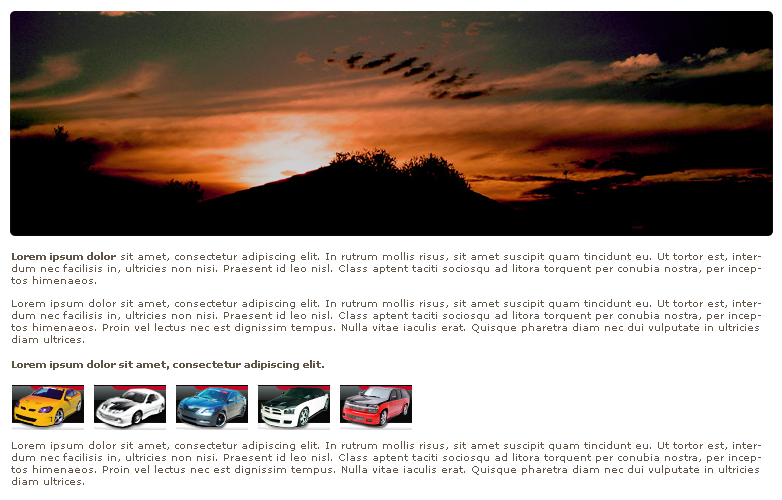
<style>
.page{position:relative;width:782px;height:500px;background:#ffffff}
.page>*{position:absolute;margin:0}
.t1{font:10px "Verdana";color:#615548}
.t2{font:10px "Verdana-Bold";color:#615548}
</style>
<div class="page">
<p class="t1" style="left:11px;top:252px;width:750px;height:32px"><span class="t2">Lorem ipsum dolor</span> sit amet, consectetur adipiscing elit. In rutrum mollis risus, sit amet suscipit quam tincidunt eu. Ut tortor est, interdum nec facilisis in, ultricies non nisi. Praesent id leo nisl. Class aptent taciti sociosqu ad litora torquent per conubia nostra, per inceptos himenaeos.</p>
<p class="t1" style="left:11px;top:299px;width:750px;height:44px">Lorem ipsum dolor sit amet, consectetur adipiscing elit. In rutrum mollis risus, sit amet suscipit quam tincidunt eu. Ut tortor est, interdum nec facilisis in, ultricies non nisi. Praesent id leo nisl. Class aptent taciti sociosqu ad litora torquent per conubia nostra, per inceptos himenaeos. Proin vel lectus nec est dignissim tempus. Nulla vitae iaculis erat. Quisque pharetra diam nec dui vulputate in ultricies diam ultrices.</p>
<p class="t2" style="left:12px;top:360px;width:312px;height:10px">Lorem ipsum dolor sit amet, consectetur adipiscing elit.</p>
<p class="t1" style="left:11px;top:441px;width:750px;height:44px">Lorem ipsum dolor sit amet, consectetur adipiscing elit. In rutrum mollis risus, sit amet suscipit quam tincidunt eu. Ut tortor est, interdum nec facilisis in, ultricies non nisi. Praesent id leo nisl. Class aptent taciti sociosqu ad litora torquent per conubia nostra, per inceptos himenaeos. Proin vel lectus nec est dignissim tempus. Nulla vitae iaculis erat. Quisque pharetra diam nec dui vulputate in ultricies diam ultrices.</p>
</div>
